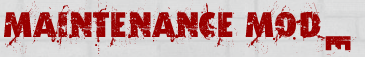
<style>
.page{position:relative;width:365px;height:57px}
.page>*{position:absolute;margin:0}
.t1{font:36px "Formfound.com";letter-spacing:0.025em;color:#990000}
</style>
<div class="page">
<p class="t1" style="left:4px;top:0px;width:317px;height:56px">Maintenance mod</p>
<p class="t1" style="left:315px;top:32px;width:42px;height:24px;rotate:90deg">e</p>
</div>
